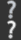
<style>
.page{position:relative;width:21px;height:40px;background:#333333}
.page>*{position:absolute;margin:0}
.t1{font:24px "MyriadPro-Regular";color:#c3c8d0}
.t2{font:24px "MyriadPro-Regular";color:#eaeaeb}
</style>
<div class="page">
<p class="t1" style="left:7px;top:1px;width:9px;height:17px">?</p>
<p class="t2" style="left:7px;top:21px;width:9px;height:17px">?</p>
</div>
